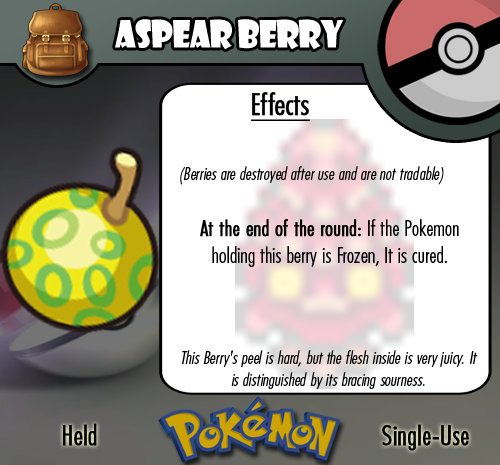
<style>
.page{position:relative;width:500px;height:465px;background:#ffffff}
.page>*{position:absolute;margin:0}
.t1{font:36.7px "ShowcardGothic-Reg";letter-spacing:-0.025em;color:#ffffff;scale:0.91 1}
.t2{font:22.2px "FuturaCondensedBQ-Light";color:#010101}
.t3{font:27.8px "FuturaCondensedBQ-Light";color:#010101;font-weight:bold}
.t4{font:30.6px "FuturaCondensedBQ-Light";color:#010101;font-weight:bold;text-decoration:underline}
.t5{font:18.1px "FuturaCondensedBQ-Light";color:#010101;font-style:italic}
.t6{font:22.2px "FuturaCondensedBQ-Light";color:#010101;font-weight:bold}
</style>
<div class="page">
<p class="t1" style="left:115px;top:19px;width:229px;height:31px">Aspear Berry</p>
<p class="t2" style="left:180px;top:92px;width:279px;height:175px"><span class="t3">  </span><span class="t4">Effects<br><br><br></span><span class="t5">(Berries are destroyed after use and are not tradable)<br><br><br><br></span><span class="t6">At the end of the round:</span> If the Pokemon holding this berry is Frozen, It is cured.</p>
<p class="t5" style="left:182px;top:350px;width:296px;height:39px;text-align:center">This Berry's peel is hard, but the flesh inside is very juicy. It is distinguished by its bracing sourness.</p>
<p class="t3" style="left:63px;top:423px;width:34px;height:23px">Held</p>
<p class="t3" style="left:382px;top:424px;width:87px;height:27px">Single-Use</p>
</div>
